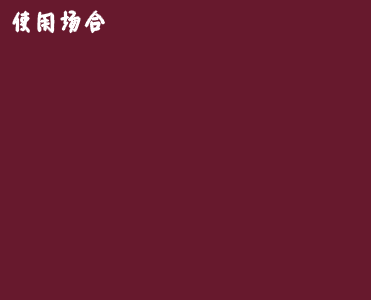
<style>
.page{position:relative;width:371px;height:300px;background:#67192d}
.page>*{position:absolute;margin:0}
.t1{font:24px "SentyTEA-Platinum";color:#ffffff}
</style>
<div class="page">
<p class="t1" style="left:13px;top:11px;width:91px;height:22px">使用场合</p>
</div>
